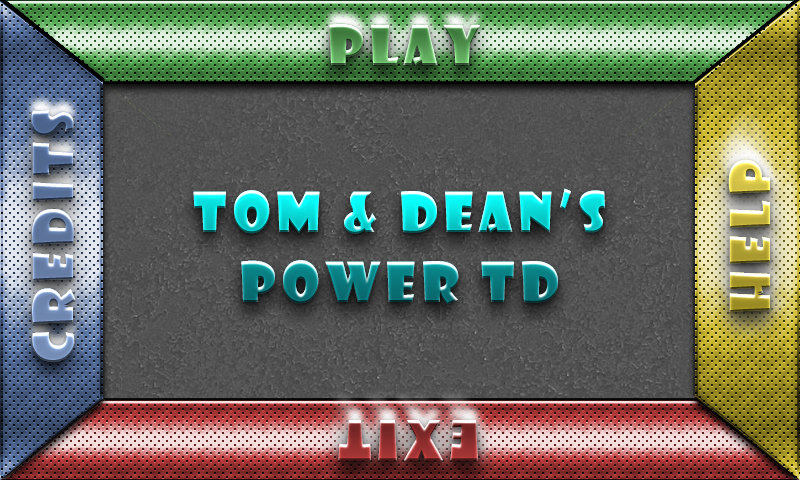
<style>
.page{position:relative;width:800px;height:480px}
.page>*{position:absolute;margin:0}
.t1{font:53.8px "ShowcardGothic-Reg";letter-spacing:0.11em}
.t2{font:53.8px/70px "ShowcardGothic-Reg";letter-spacing:0.11em}
</style>
<div class="page">
<p class="t1" style="left:31px;top:110px;width:45px;height:252px;rotate:-90deg">credits</p>
<p class="t1" style="left:31px;top:110px;width:45px;height:252px;rotate:-90deg">credits</p>
<p class="t1" style="left:31px;top:110px;width:45px;height:252px;rotate:-90deg">credits</p>
<p class="t1" style="left:31px;top:110px;width:45px;height:252px;rotate:-90deg">credits</p>
<p class="t1" style="left:728px;top:159px;width:42px;height:153px;rotate:-90deg">help</p>
<p class="t1" style="left:728px;top:159px;width:42px;height:153px;rotate:-90deg">help</p>
<p class="t1" style="left:728px;top:159px;width:42px;height:153px;rotate:-90deg">help</p>
<p class="t1" style="left:728px;top:159px;width:42px;height:153px;rotate:-90deg">help</p>
<p class="t2" style="left:193px;top:188px;width:412px;height:117px;text-align:center">Tom &amp; Dean’s<br>Power TD</p>
<p class="t2" style="left:193px;top:188px;width:412px;height:117px;text-align:center">Tom &amp; Dean’s<br>Power TD</p>
<p class="t2" style="left:193px;top:188px;width:412px;height:117px;text-align:center">Tom &amp; Dean’s<br>Power TD</p>
<p class="t1" style="left:338px;top:420px;width:140px;height:41px;rotate:180deg">exit</p>
<p class="t1" style="left:338px;top:420px;width:140px;height:41px;rotate:180deg">exit</p>
<p class="t1" style="left:338px;top:420px;width:140px;height:41px;rotate:180deg">exit</p>
<p class="t1" style="left:338px;top:420px;width:140px;height:41px;rotate:180deg">exit</p>
</div>
